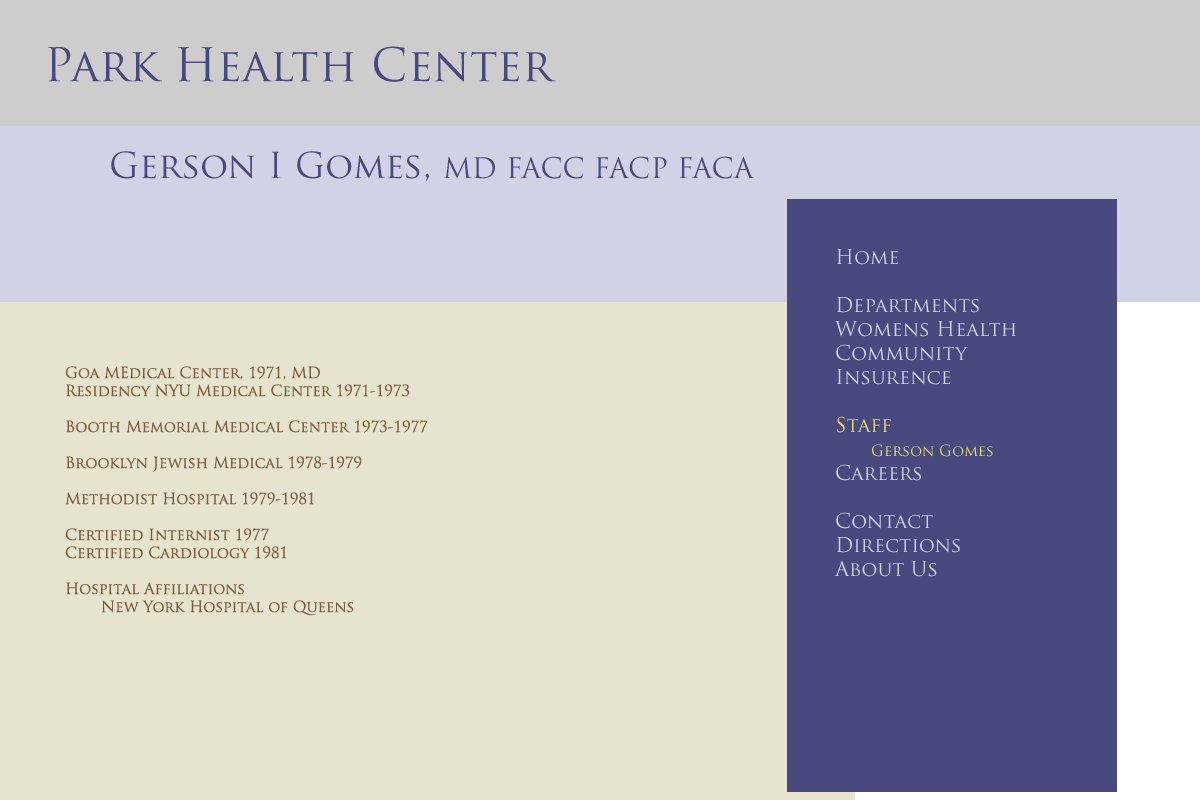
<style>
.page{position:relative;width:1200px;height:800px;background:#e6e3cf}
.page>*{position:absolute;margin:0}
.t1{font:45px "TrajanPro-Regular";color:#494980}
.t2{font:27.5px "TrajanPro-Regular";color:#494980}
.t3{font:35px "TrajanPro-Regular";color:#494980}
.t4{font:20px "TrajanPro-Regular";color:#d2d2e6}
.t5{font:20px "TrajanPro-Regular";color:#e6e073}
.t6{font:15px "TrajanPro-Regular";color:#e6e073}
.t7{font:15px "TrajanPro-Regular";color:#805d40}
</style>
<div class="page">
<p class="t1" style="left:48px;top:46px;width:508px;height:36px">Park Health Center</p>
<p class="t2" style="left:111px;top:151px;width:644px;height:31px"><span class="t3">Gerson I Gomes, </span>MD FACC FACP FACA</p>
<p class="t4" style="left:834px;top:249px;width:182px;height:328px">Home<br><br>Departments<br>Womens Health<br>Community<br>Insurence<br><br><span class="t5">Staff<br> </span><span class="t6">Gerson Gomes<br></span>Careers<br><br>Contact<br>Directions<br>About Us</p>
<p class="t7" style="left:65px;top:366px;width:363px;height:250px">Goa MEdical Center, 1971, MD<br>Residency NYU Medical Center 1971-1973<br><br>Booth Memorial Medical Center 1973-1977<br><br>Brooklyn Jewish Medical 1978-1979<br><br>Methodist Hospital 1979-1981<br><br>Certified Internist 1977<br>Certified Cardiology 1981<br><br>Hospital Affiliations<br> New York Hospital of Queens</p>
</div>
